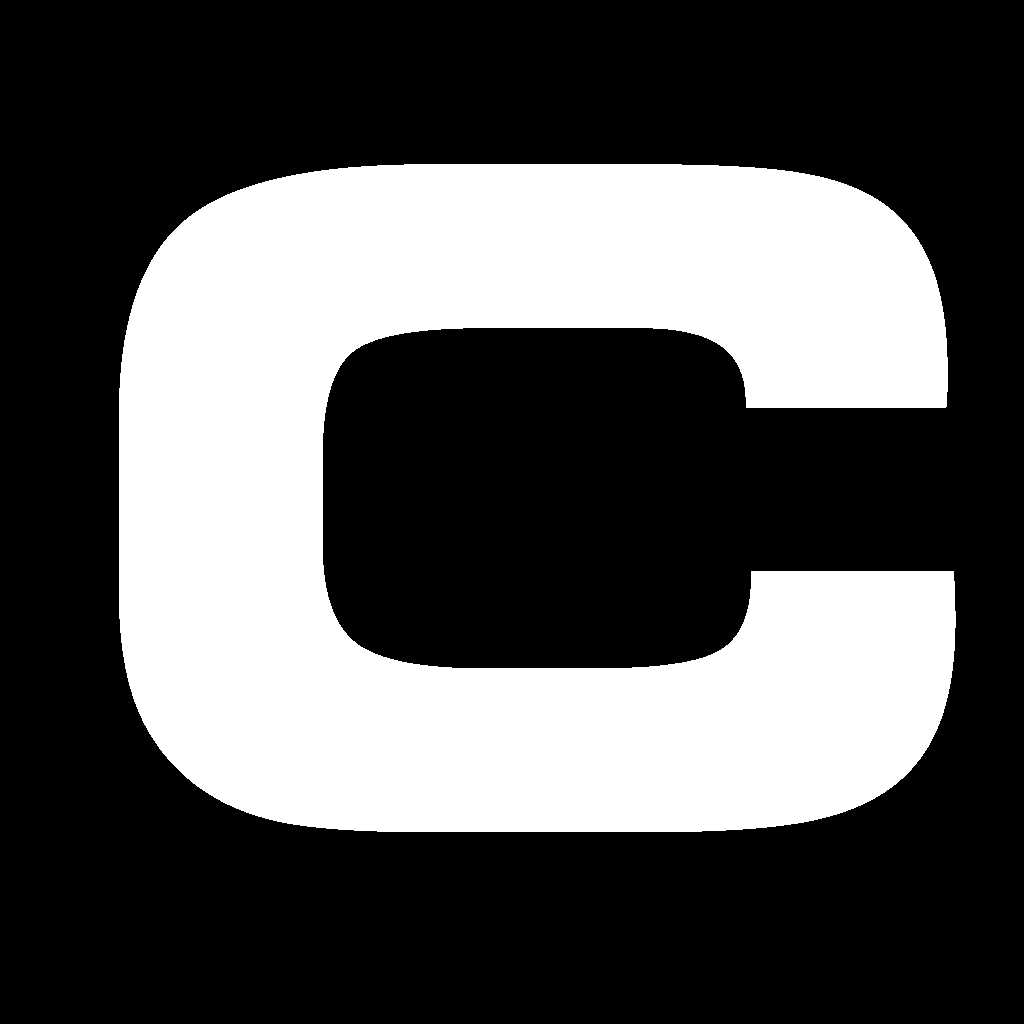
<style>
.page{position:relative;width:1024px;height:1024px;background:#000000}
.page>*{position:absolute;margin:0}
.t1{font:895.8px "Square721BT-BoldExtended";color:#ffffff}
</style>
<div class="page">
<p class="t1" style="left:119px;top:164px;width:837px;height:668px">C</p>
</div>
